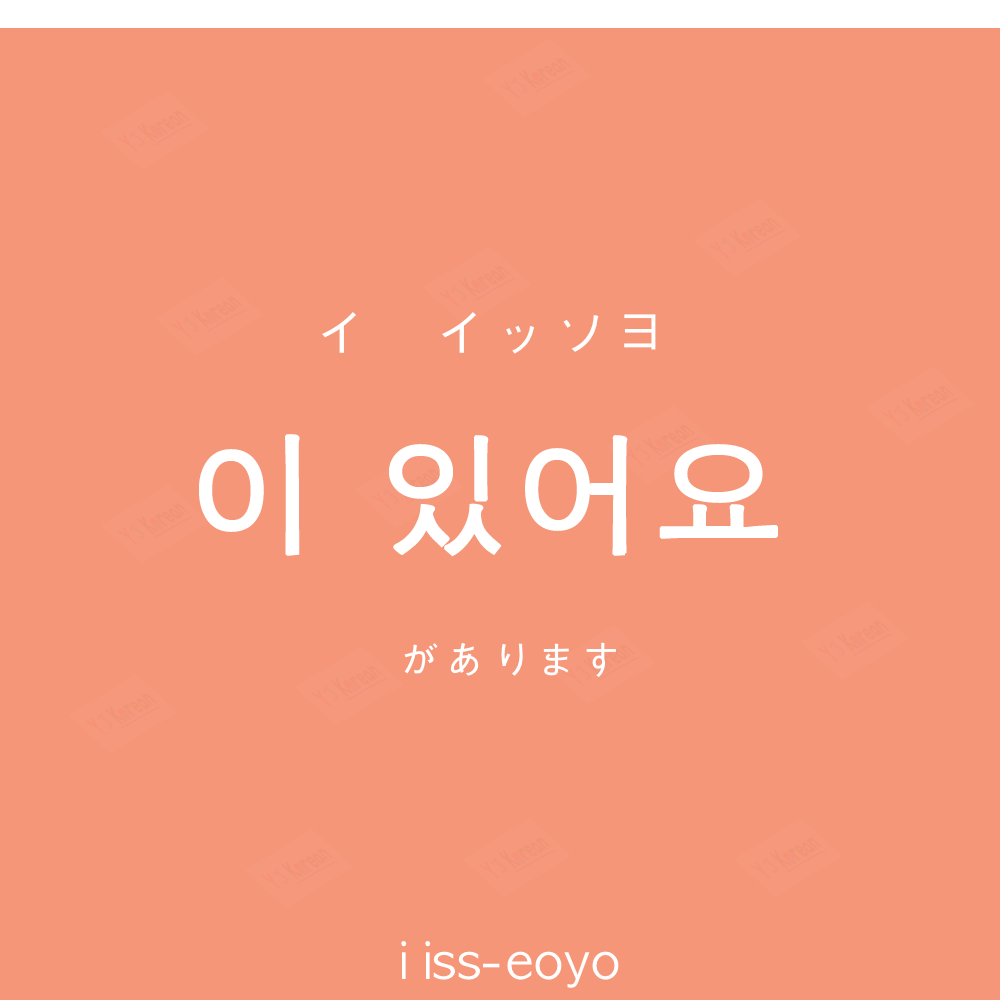
<style>
.page{position:relative;width:1000px;height:1000px;background:#f69679}
.page>*{position:absolute;margin:0}
.t1{font:60px "AppleGothic";color:#ffffff}
.t2{font:130px "AppleGothic";letter-spacing:0.04em;color:#ffffff;font-weight:bold}
.t3{font:45px "AppleGothic";color:#ffffff}
.t4{font:50px "AppleGothic";color:#ffffff}
</style>
<div class="page">
<p class="t1" style="left:322px;top:312px;width:334px;height:42px">イ　イッソヨ</p>
<p class="t2" style="left:199px;top:434px;width:579px;height:123px">이 있어요</p>
<p class="t3" style="left:404px;top:642px;width:212px;height:35px">があります</p>
<p class="t4" style="left:401px;top:941px;width:218px;height:47px">i iss-eoyo</p>
</div>
